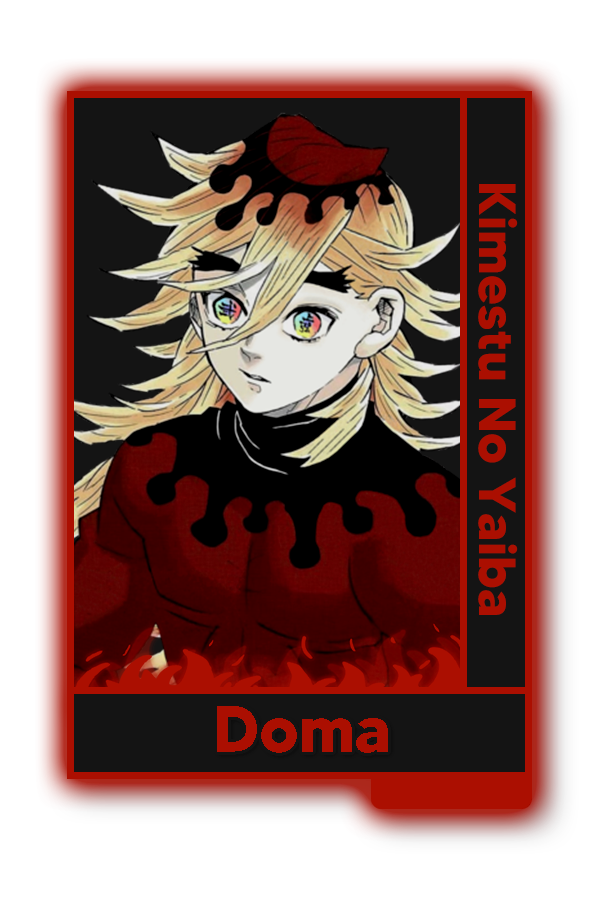
<style>
.page{position:relative;width:600px;height:900px;background:#ffffff}
.page>*{position:absolute;margin:0}
.t1{font:52px "MADETOMMY-Bold";color:#ab0f01}
.t2{font:65.2px "MADETOMMY-Bold";color:#ab0f01}
</style>
<div class="page">
<p class="t1" style="left:478px;top:184px;width:40px;height:431px;rotate:90deg">Kimestu No Yaiba</p>
<p class="t2" style="left:217px;top:706px;width:171px;height:47px">Doma</p>
</div>
